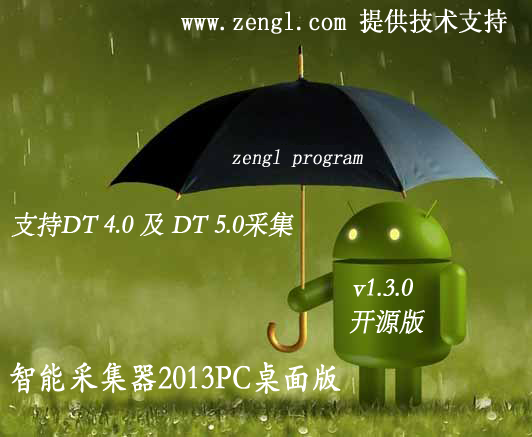
<style>
.page{position:relative;width:532px;height:437px}
.page>*{position:absolute;margin:0}
.t1{font:20.5px "SimSun";color:#ffffff;font-weight:bold;font-style:italic;scale:0.94 1}
.t2{font:25.9px "STSong";color:#ffffff;font-weight:bold;font-style:italic;scale:0.94 1}
</style>
<div class="page">
<p class="t1" style="left:232px;top:149px;width:131px;height:18px">zengl program</p>
<p class="t2" style="left:11px;top:212px;width:283px;height:25px">支持DT 4.0 及 DT 5.0采集</p>
<p class="t2" style="left:353px;top:278px;width:60px;height:19px">v1.3.0</p>
<p class="t2" style="left:349px;top:309px;width:76px;height:25px">开源版</p>
</div>
